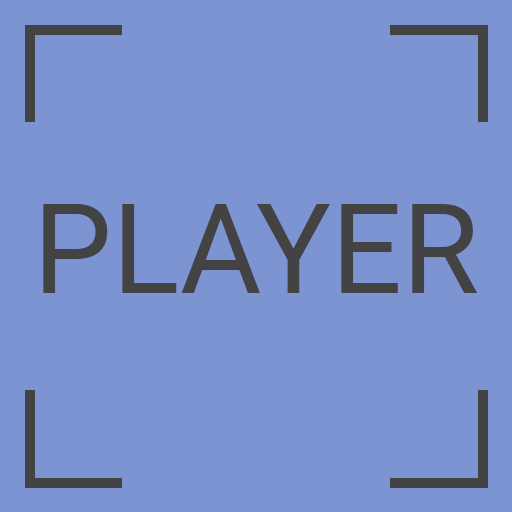
<style>
.page{position:relative;width:512px;height:512px;background:#7d94d3}
.page>*{position:absolute;margin:0}
.t1{font:125px "Roboto-Regular";color:#434343}
</style>
<div class="page">
<p class="t1" style="left:43px;top:204px;width:434px;height:89px">PLAYER</p>
</div>
